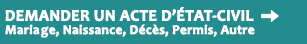
<style>
.page{position:relative;width:307px;height:44px;background:#238c8f}
.page>*{position:absolute;margin:0}
.t1{font:13.3px/13.3px "Candara-Bold";color:#ffffff;font-weight:bold}
.t2{font:10.7px/13.3px "Candara-Bold";color:#ffffff;font-weight:bold}
.t3{font:16px/13.3px "Candara-Bold";color:#ffffff;font-weight:bold}
.t4{font:16px/13.3px "Candara-Bold";color:#ffffff;text-transform:uppercase;font-weight:bold}
</style>
<div class="page">
<p class="t1" style="left:5px;top:7px;width:250px;height:31px"><span class="t2"><br></span><span class="t3">DEMANDER UN ACTE D’</span><span class="t4">é</span><span class="t3">TAT-CIVIL<br></span>Maria ge, Naissance, Décès, Permis, Autre</p>
</div>
